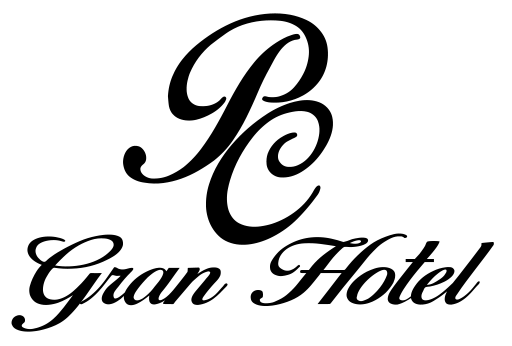
<style>
.page{position:relative;width:512px;height:346px;background:#ffffff}
.page>*{position:absolute;margin:0}
.t1{font:200.6px "BirdsofParadise-PersonaluseOnly";color:#000000}
.t2{font:243.1px "BirdsofParadise-PersonaluseOnly";color:#000000;font-variant:small-caps;scale:1.08 1}
.t3{font:83.1px "BirdsofParadise-PersonaluseOnly";color:#000000;scale:1.31 1}
</style>
<div class="page">
<p class="t1" style="left:123px;top:13px;width:205px;height:171px">P</p>
<p class="t2" style="left:206px;top:100px;width:127px;height:145px">c</p>
<p class="t3" style="left:11px;top:233px;width:483px;height:99px">Gran Hotel</p>
</div>
